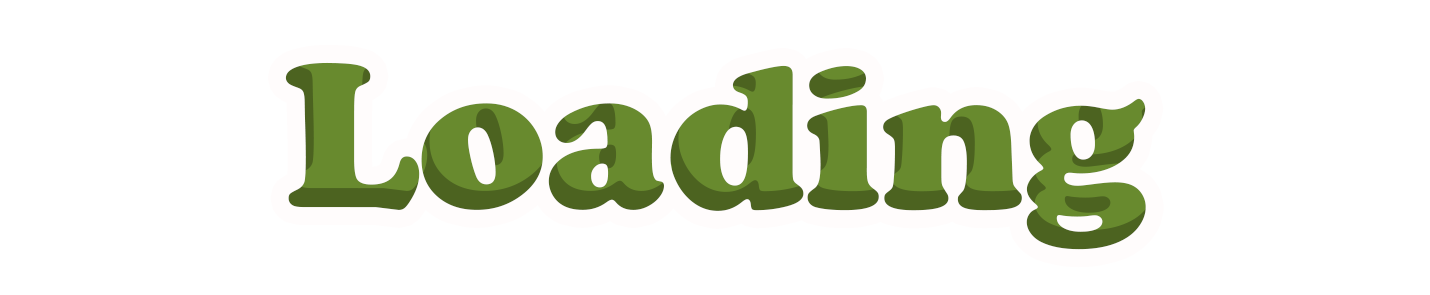
<style>
.page{position:relative;width:1430px;height:295px;background:#ffffff}
.page>*{position:absolute;margin:0}
.t1{font:213px "CooperBlack";color:#688a2e}
</style>
<div class="page">
<p class="t1" style="left:285px;top:62px;width:861px;height:188px">Loading</p>
</div>
